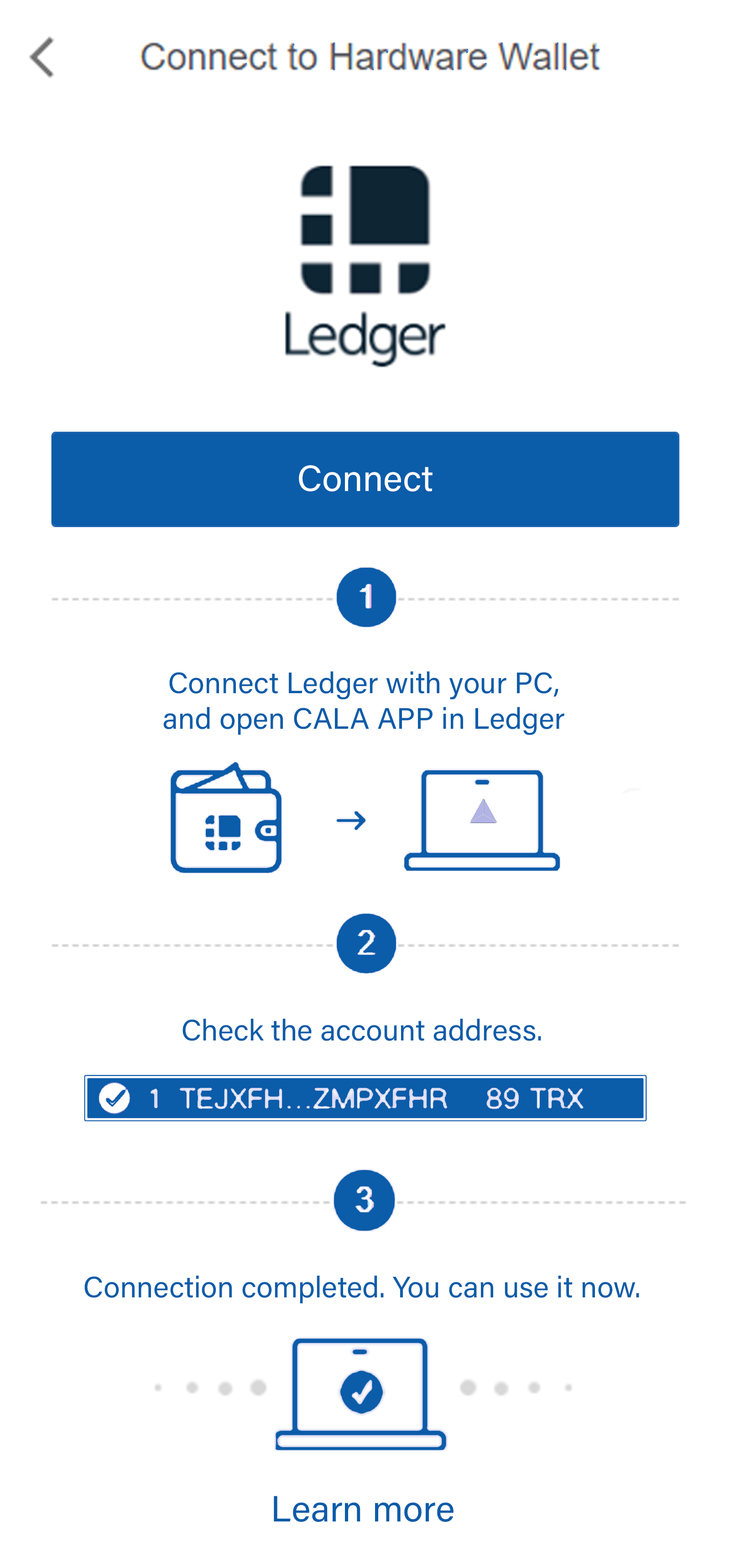
<style>
.page{position:relative;width:730px;height:1568px;background:#ffffff}
.page>*{position:absolute;margin:0}
.t1{font:36.5px "AcuminConcept-Regular";color:#ffffff;font-style:italic}
.t2{font:29.7px "AcuminConcept-Regular";color:#0b5ca9;font-style:italic}
.t3{font:36.5px "AcuminConcept-Regular";color:#0b5ca9;font-style:italic}
</style>
<div class="page">
<p class="t1" style="left:299px;top:465px;width:134px;height:26px">Connect</p>
<p class="t2" style="left:163px;top:671px;width:401px;height:64px;text-align:center">Connect Ledger with your PC,<br>and open CALA APP in Ledger</p>
<p class="t2" style="left:183px;top:1019px;width:358px;height:22px">Check the account address.</p>
<p class="t2" style="left:84px;top:1275px;width:555px;height:28px">Connection completed. You can use it now.</p>
<p class="t3" style="left:274px;top:1496px;width:180px;height:26px">Learn more</p>
</div>
